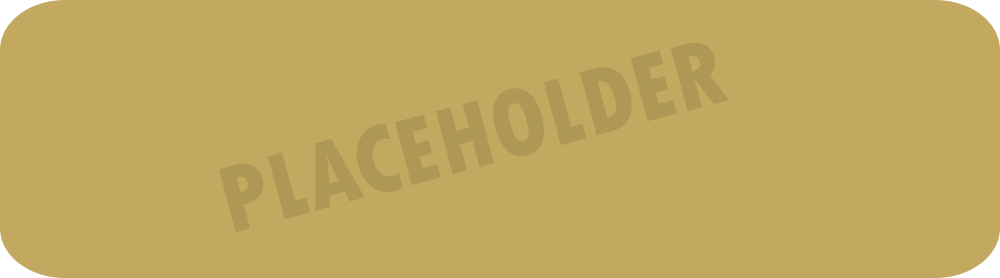
<style>
.page{position:relative;width:1000px;height:278px;background:#c3a860}
.page>*{position:absolute;margin:0}
.t1{font:100px "TwCenMT-CondensedExtraBold";color:#af9756}
</style>
<div class="page">
<p class="t1" style="left:219px;top:42px;width:510px;height:191px;rotate:-15deg">PLACEHOLDER</p>
</div>
